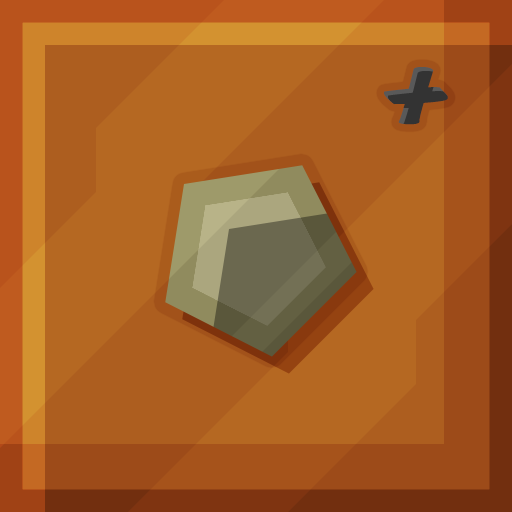
<style>
.page{position:relative;width:512px;height:512px;background:#b56822}
.page>*{position:absolute;margin:0}
.t1{font:127.6px "ComicBook";color:#333333}
</style>
<div class="page">
<p class="t1" style="left:384px;top:67px;width:64px;height:58px">+</p>
</div>
